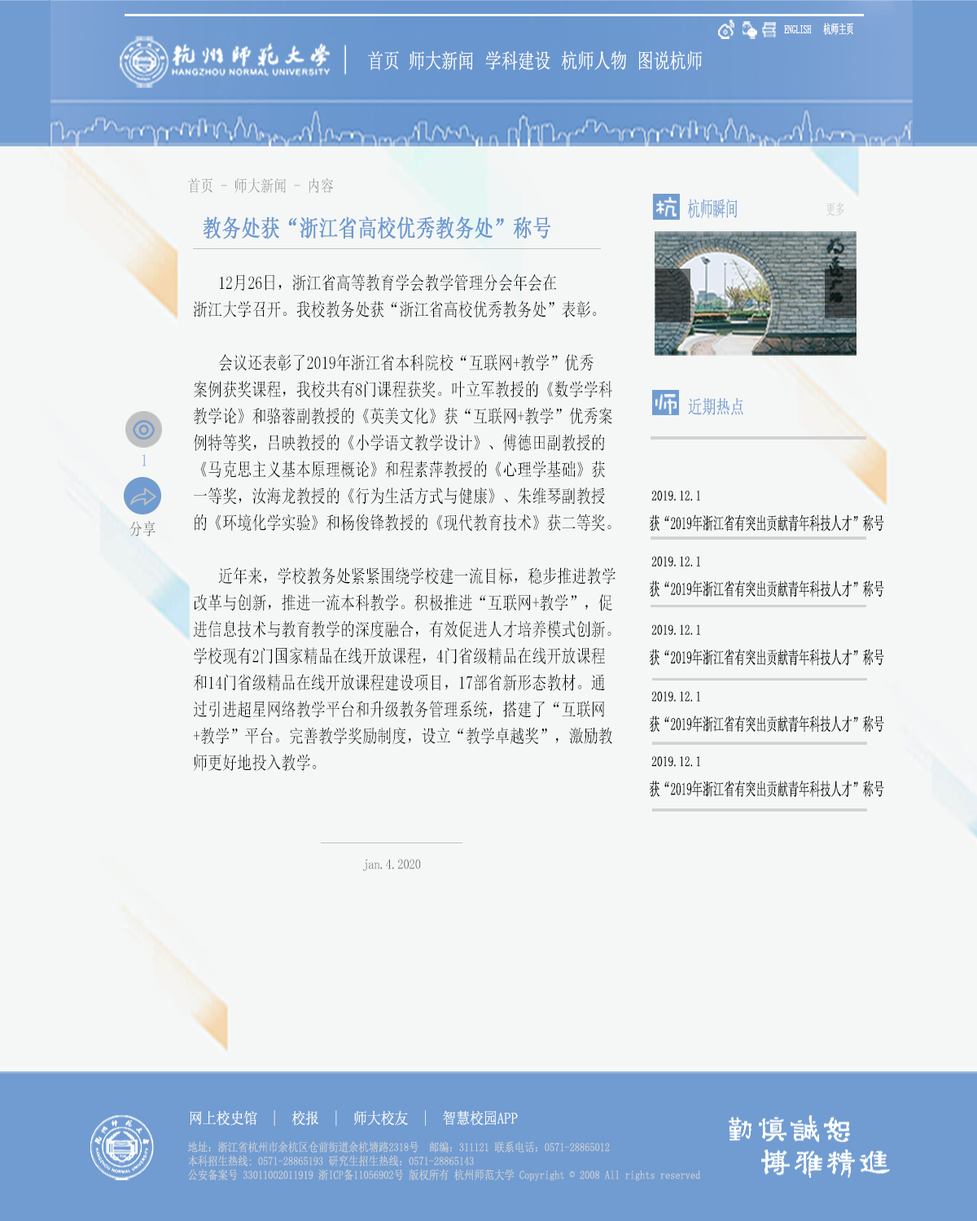
<style>
.page{position:relative;width:977px;height:1221px;background:#f5f7f6}
.page>*{position:absolute;margin:0}
.t1{font:12.6px "LiSu";color:#fefefd;scale:0.61 1}
.t2{font:12.6px "SimSun";color:#fefefd;scale:0.61 1}
.t3{font:20.5px "SimSun";color:#fefefd;scale:0.8 1}
.t4{font:16.3px "SimSun";color:#8e8e8d;scale:0.82 1}
.t5{font:20.8px "SimSun";color:#719cd1;scale:0.61 1}
.t6{font:14.7px "SimSun";color:#d0d0cb;scale:0.64 1}
.t7{font:23.6px "SimSun";color:#6b98cf;font-weight:bold;scale:0.8 1}
.t8{font:18.3px/22.8px "SimSun";color:#000000;scale:0.81 1}
.t9{font:18.7px "SimSun";color:#719cd1;scale:0.75 1}
.t10{font:16.7px "SimSun";color:#719cd1;scale:0.8 1}
.t11{font:14.3px "SimSun";color:#020202;scale:0.77 1}
.t12{font:16.7px "SimSun";color:#686767;scale:0.8 1}
.t13{font:17.5px "SimSun";color:#040404;scale:0.61 1}
.t14{font:13.8px "SimSun";color:#655f5f;scale:0.85 1}
.t15{font:15.5px "SimSun";color:#f9fafc;scale:0.89 1}
.t16{font:11.8px/13.9px "SimSun";color:#cccfd2;scale:0.85 1}
</style>
<div class="page">
<p class="t1" style="left:784px;top:25px;width:27px;height:8px">ENGLISH</p>
<p class="t2" style="left:823px;top:23px;width:30px;height:12px">杭师主页</p>
<p class="t3" style="left:368px;top:50px;width:31px;height:20px">首页</p>
<p class="t3" style="left:409px;top:50px;width:64px;height:20px">师大新闻</p>
<p class="t3" style="left:485px;top:50px;width:65px;height:21px">学科建设</p>
<p class="t3" style="left:561px;top:50px;width:66px;height:20px">杭师人物</p>
<p class="t3" style="left:638px;top:50px;width:64px;height:20px">图说杭师</p>
<p class="t4" style="left:188px;top:177px;width:146px;height:17px">首页 - 师大新闻 - 内容</p>
<p class="t5" style="left:688px;top:199px;width:49px;height:20px">杭师瞬间</p>
<p class="t6" style="left:826px;top:202px;width:18px;height:15px">更多</p>
<p class="t7" style="left:203px;top:217px;width:348px;height:22px">教务处获“浙江省高校优秀教务处”称号</p>
<p class="t8" style="left:193px;top:273px;width:422px;height:498px">12月26日，浙江省高等教育学会教学管理分会年会在<br>浙江大学召开。我校教务处获“浙江省高校优秀教务处”表彰。<br><br> 会议还表彰了2019年浙江省本科院校“互联网+教学”优秀<br>案例获奖课程，我校共有8门课程获奖。叶立军教授的《数学学科<br>教学论》和骆蓉副教授的《英美文化》获“互联网+教学”优秀案<br>例特等奖，吕映教授的《小学语文教学设计》、傅德田副教授的<br>《马克思主义基本原理概论》和程素萍教授的《心理学基础》获<br>一等奖，汝海龙教授的《行为生活方式与健康》、朱维琴副教授<br>的《环境化学实验》和杨俊锋教授的《现代教育技术》获二等奖。<br><br> 近年来，学校教务处紧紧围绕学校建一流目标，稳步推进教学<br>改革与创新，推进一流本科教学。积极推进“互联网+教学”，促<br>进信息技术与教育教学的深度融合，有效促进人才培养模式创新。<br>学校现有2门国家精品在线开放课程，4门省级精品在线开放课程<br>和14门省级精品在线开放课程建设项目，17部省新形态教材。通<br>过引进超星网络教学平台和升级教务管理系统，搭建了“互联网<br>+教学”平台。完善教学奖励制度，设立“教学卓越奖”，激励教<br>师更好地投入教学。</p>
<p class="t9" style="left:688px;top:397px;width:55px;height:19px">近期热点</p>
<p class="t10" style="left:142px;top:454px;width:5px;height:12px">1</p>
<p class="t11" style="left:651px;top:490px;width:49px;height:11px">2019.12.1</p>
<p class="t12" style="left:129px;top:521px;width:26px;height:15px">分享</p>
<p class="t13" style="left:650px;top:514px;width:234px;height:17px">获“2019年浙江省有突出贡献青年科技人才”称号</p>
<p class="t11" style="left:651px;top:556px;width:49px;height:10px">2019.12.1</p>
<p class="t13" style="left:650px;top:580px;width:234px;height:17px">获“2019年浙江省有突出贡献青年科技人才”称号</p>
<p class="t11" style="left:651px;top:624px;width:49px;height:11px">2019.12.1</p>
<p class="t13" style="left:650px;top:649px;width:234px;height:17px">获“2019年浙江省有突出贡献青年科技人才”称号</p>
<p class="t11" style="left:651px;top:691px;width:49px;height:11px">2019.12.1</p>
<p class="t13" style="left:650px;top:715px;width:234px;height:18px">获“2019年浙江省有突出贡献青年科技人才”称号</p>
<p class="t11" style="left:651px;top:756px;width:49px;height:11px">2019.12.1</p>
<p class="t13" style="left:650px;top:781px;width:234px;height:17px">获“2019年浙江省有突出贡献青年科技人才”称号</p>
<p class="t14" style="left:363px;top:859px;width:58px;height:12px">jan.4.2020</p>
<p class="t15" style="left:190px;top:1110px;width:328px;height:16px">网上校史馆  |  校报  |  师大校友  |  智慧校园APP</p>
<p class="t16" style="left:187px;top:1141px;width:513px;height:40px">地址：浙江省杭州市余杭区仓前街道余杭塘路2318号　邮编：311121 联系电话：0571-28865012<br>本科招生热线: 0571-28865193 研究生招生热线：0571-28865143<br>公安备案号 33011002011919 浙ICP备11056902号 版权所有 杭州师范大学 Copyright © 2008 All rights reserved</p>
</div>
